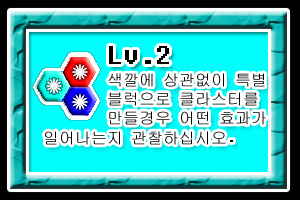
<style>
.page{position:relative;width:300px;height:200px;background:#00fffc}
.page>*{position:absolute;margin:0}
.t1{font:16px "Fixedsys";color:#000000}
.t2{font:32px "Fixedsys";color:#000000}
</style>
<div class="page">
<p class="t1" style="left:45px;top:46px;width:221px;height:99px"><span class="t2">    Lv.2</span><br>        색깔에 상관없이 특별<br>        블럭으로 클라스터를 <br>        만들경우 어떤 효과가<br>일어나는지 관찰하십시오.</p>
</div>
